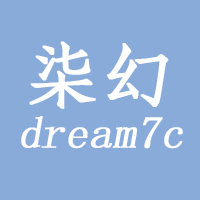
<style>
.page{position:relative;width:200px;height:200px;background:#88abda}
.page>*{position:absolute;margin:0}
.t1{font:45px/70px "SimSun";color:#ffffff;font-weight:bold;font-style:italic}
.t2{font:72px/70px "ZhuqueFangsong-Regular";color:#ffffff;font-weight:bold}
</style>
<div class="page">
<p class="t1" style="left:21px;top:41px;width:162px;height:108px;text-align:center"><span class="t2">柒幻<br></span>dream7c</p>
</div>
